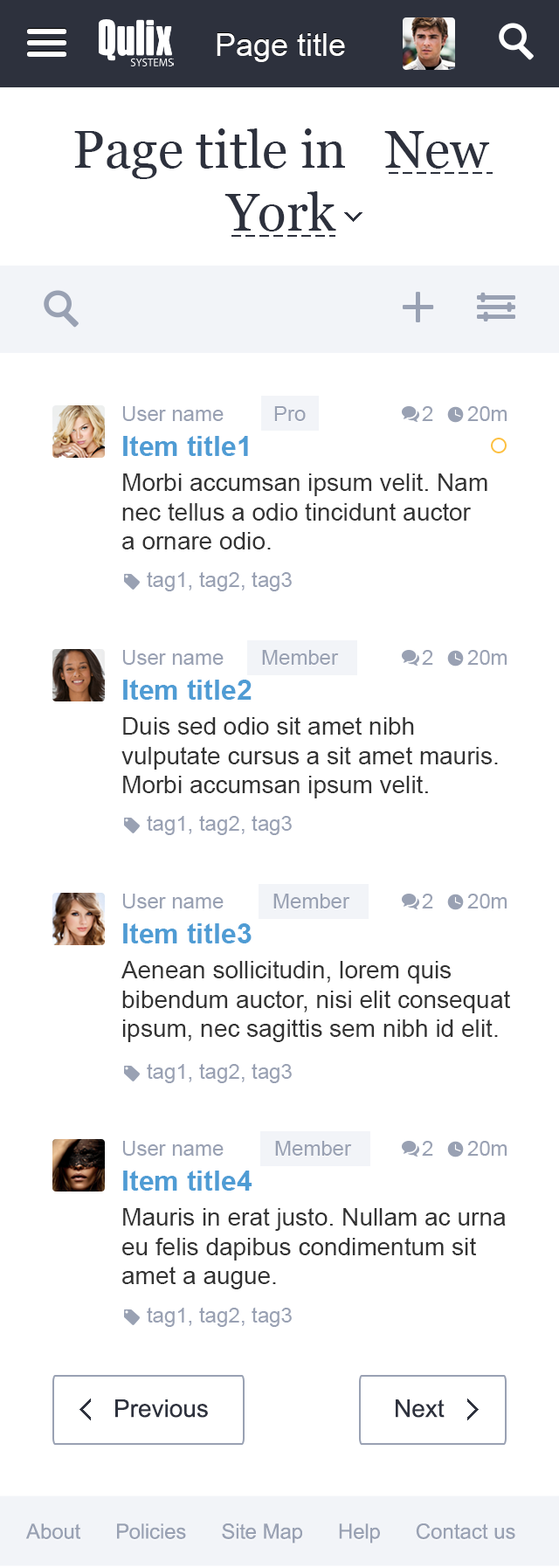
<style>
.page{position:relative;width:559px;height:1568px;background:#ffffff}
.page>*{position:absolute;margin:0}
.t1{font:31.4px "ArialMT";color:#ffffff}
.t2{font:52.4px "Georgia";color:#2d313d}
.t3{font:24.5px "ArialMT";color:#333333}
.t4{font:21px "ArialMT";color:#99a1b3}
.t5{font:28px/34.9px "Arial-BoldMT";color:#4f9cd4}
.t6{font:24.5px/34.9px "ArialMT";color:#333333}
.t7{font:24.5px "ArialMT";color:#2d313d}
</style>
<div class="page">
<p class="t1" style="left:217px;top:33px;width:128px;height:29px">Page title</p>
<p class="t2" style="left:74px;top:128px;width:416px;height:103px;text-align:center">Page title in   New York</p>
<p class="t3" style="left:122px;top:406px;width:365px;height:143px"><span class="t4">User name<br></span><span class="t5">Item title1<br></span><span class="t6">Morbi accumsan ipsum velit. Nam </span>nec tellus a odio tincidunt auctor<br>a ornare odio.</p>
<p class="t4" style="left:274px;top:406px;width:32px;height:15px">Pro</p>
<p class="t4" style="left:422px;top:406px;width:11px;height:15px">2</p>
<p class="t4" style="left:467px;top:406px;width:41px;height:15px">20m</p>
<p class="t4" style="left:147px;top:571px;width:145px;height:20px">tag1, tag2, tag3</p>
<p class="t3" style="left:121px;top:650px;width:377px;height:148px"><span class="t4">User name<br></span><span class="t5">Item title2<br></span><span class="t6">Duis sed odio sit amet nibh </span>vulputate cursus a sit amet mauris. Morbi accumsan ipsum velit.</p>
<p class="t4" style="left:262px;top:650px;width:77px;height:15px">Member</p>
<p class="t4" style="left:422px;top:650px;width:11px;height:15px">2</p>
<p class="t4" style="left:467px;top:650px;width:41px;height:15px">20m</p>
<p class="t4" style="left:147px;top:815px;width:145px;height:20px">tag1, tag2, tag3</p>
<p class="t3" style="left:121px;top:894px;width:389px;height:148px"><span class="t4">User name<br></span><span class="t5">Item title3<br></span><span class="t6">Aenean sollicitudin, lorem quis </span>bibendum auctor, nisi elit consequat ipsum, nec sagittis sem nibh id elit.</p>
<p class="t4" style="left:273px;top:894px;width:77px;height:14px">Member</p>
<p class="t4" style="left:422px;top:894px;width:11px;height:14px">2</p>
<p class="t4" style="left:467px;top:894px;width:41px;height:14px">20m</p>
<p class="t4" style="left:147px;top:1063px;width:145px;height:20px">tag1, tag2, tag3</p>
<p class="t3" style="left:122px;top:1141px;width:384px;height:148px"><span class="t4">User name<br></span><span class="t5">Item title4<br></span><span class="t6">Mauris in erat justo. Nullam ac urna </span>eu felis dapibus condimentum sit amet a augue.</p>
<p class="t4" style="left:275px;top:1141px;width:77px;height:15px">Member</p>
<p class="t4" style="left:422px;top:1141px;width:11px;height:15px">2</p>
<p class="t4" style="left:467px;top:1141px;width:41px;height:15px">20m</p>
<p class="t4" style="left:147px;top:1307px;width:145px;height:20px">tag1, tag2, tag3</p>
<p class="t7" style="left:115px;top:1399px;width:93px;height:19px">Previous</p>
<p class="t7" style="left:396px;top:1399px;width:49px;height:19px">Next</p>
<p class="t4" style="left:25px;top:1523px;width:490px;height:21px">About      Policies      Site Map      Help      Contact us</p>
</div>
